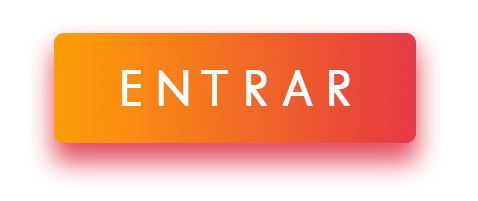
<style>
.page{position:relative;width:478px;height:201px;background:#ffffff}
.page>*{position:absolute;margin:0}
.t1{font:60px "NormafixedTryout";letter-spacing:0.075em;color:#ffffff;font-weight:bold}
</style>
<div class="page">
<p class="t1" style="left:122px;top:70px;width:228px;height:36px">ENTRAR</p>
</div>
